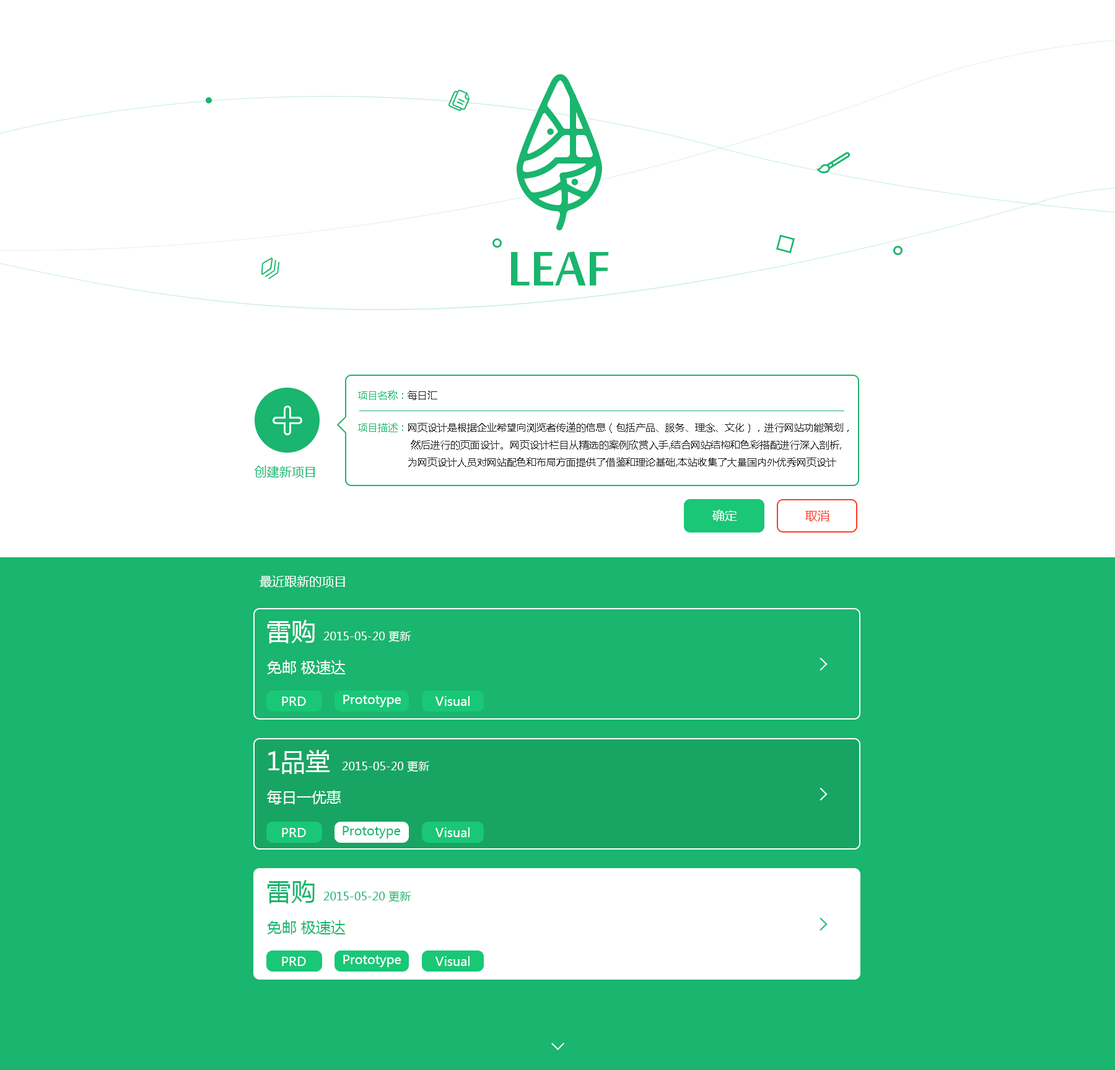
<style>
.page{position:relative;width:1115px;height:1070px;background:#ffffff}
.page>*{position:absolute;margin:0}
.t1{font:74.3px "MoolBoran";color:#1ab56e}
.t2{font:9.9px "MicrosoftYaHei";color:#1ab56e}
.t3{font:9.9px "MicrosoftYaHei";color:#212121}
.t4{font:12.4px "MicrosoftYaHei";color:#1ab56e}
.t5{font:12.4px "MicrosoftYaHei";color:#ffffff}
.t6{font:12.4px "MicrosoftYaHei";color:#ff3c25}
.t7{font:24.8px "MicrosoftYaHei";color:#ffffff}
.t8{font:11.1px "MicrosoftYaHei";color:#ffffff}
.t9{font:14.9px "MicrosoftYaHei";color:#ffffff}
.t10{font:24.8px "MicrosoftYaHei";color:#1ab56e}
.t11{font:11.1px "MicrosoftYaHei";color:#1ab56e}
.t12{font:14.9px "MicrosoftYaHei";color:#1ab56e}
</style>
<div class="page">
<p class="t1" style="left:511px;top:251px;width:98px;height:34px">LEAF</p>
<p class="t2" style="left:358px;top:390px;width:79px;height:10px">项目名称：<span class="t3">每日汇</span></p>
<p class="t3" style="left:358px;top:422px;width:490px;height:45px"><span class="t2">项目描述：</span>网页设计是根据企业希望向浏览者传递的信息（包括产品、服务、理念、文化），进行网站功能策划，<br>                 然后进行的页面设计。网页设计栏目从精选的案例欣赏入手,结合网站结构和色彩搭配进行深入剖析,<br>                为网页设计人员对网站配色和布局方面提供了借鉴和理论基础,本站收集了大量国内外优秀网页设计</p>
<p class="t4" style="left:254px;top:466px;width:61px;height:12px">创建新项目</p>
<p class="t5" style="left:711px;top:510px;width:26px;height:11px">确定</p>
<p class="t6" style="left:805px;top:510px;width:24px;height:11px">取消</p>
<p class="t5" style="left:259px;top:575px;width:86px;height:13px">最近跟新的项目</p>
<p class="t7" style="left:267px;top:620px;width:48px;height:23px">雷购</p>
<p class="t8" style="left:323px;top:631px;width:88px;height:11px">2015-05-20 更新</p>
<p class="t9" style="left:267px;top:660px;width:78px;height:14px">免邮 极速达</p>
<p class="t5" style="left:282px;top:697px;width:24px;height:9px">PRD</p>
<p class="t5" style="left:343px;top:695px;width:58px;height:12px">Prototype</p>
<p class="t5" style="left:435px;top:696px;width:34px;height:10px">Visual</p>
<p class="t7" style="left:268px;top:750px;width:62px;height:24px">1品堂</p>
<p class="t8" style="left:342px;top:761px;width:88px;height:11px">2015-05-20 更新</p>
<p class="t9" style="left:267px;top:790px;width:74px;height:14px">每日一优惠</p>
<p class="t5" style="left:282px;top:828px;width:24px;height:9px">PRD</p>
<p class="t4" style="left:342px;top:826px;width:59px;height:12px">Prototype</p>
<p class="t5" style="left:435px;top:827px;width:34px;height:10px">Visual</p>
<p class="t10" style="left:267px;top:880px;width:48px;height:23px">雷购</p>
<p class="t11" style="left:323px;top:891px;width:88px;height:11px">2015-05-20 更新</p>
<p class="t12" style="left:267px;top:920px;width:78px;height:14px">免邮 极速达</p>
<p class="t5" style="left:282px;top:957px;width:24px;height:9px">PRD</p>
<p class="t5" style="left:343px;top:955px;width:58px;height:12px">Prototype</p>
<p class="t5" style="left:435px;top:956px;width:34px;height:10px">Visual</p>
</div>
